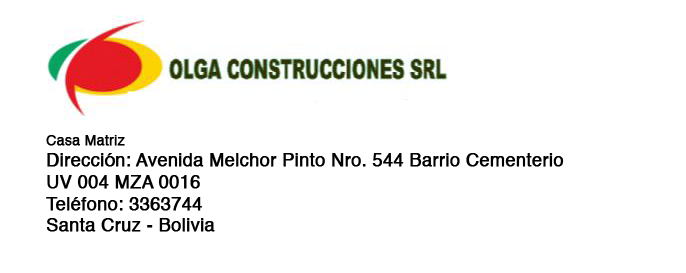
<style>
.page{position:relative;width:686px;height:273px;background:#ffffff}
.page>*{position:absolute;margin:0}
.t1{font:18px "Helvetica";color:#000000;font-weight:bold}
.t2{font:14px "Helvetica";color:#000000;font-weight:bold}
</style>
<div class="page">
<p class="t1" style="left:46px;top:135px;width:518px;height:97px"><span class="t2">Casa Matriz<br></span>Dirección: Avenida Melchor Pinto Nro. 544 Barrio Cementerio<br>UV 004 MZA 0016<br>Teléfono: 3363744<br>Santa Cruz - Bolivia</p>
</div>
